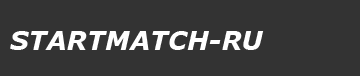
<style>
.page{position:relative;width:360px;height:76px;background:#333333}
.page>*{position:absolute;margin:0}
.t1{font:26.2px "Verdana-BoldItalic";color:#ffffff}
</style>
<div class="page">
<p class="t1" style="left:10px;top:31px;width:254px;height:19px">STARTMATCH-RU</p>
</div>
